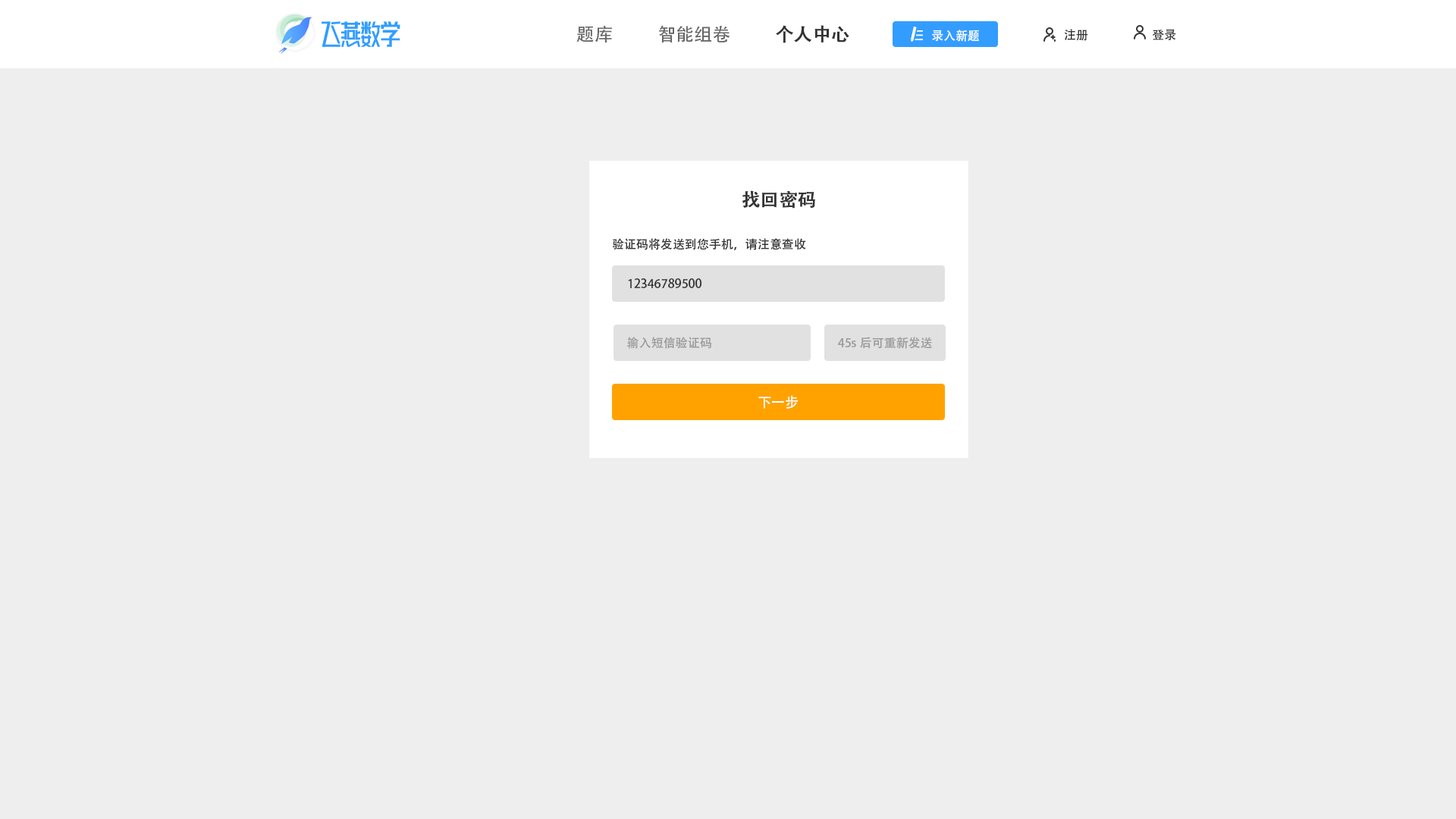
<style>
.page{position:relative;width:1456px;height:819px;background:#eeeeee}
.page>*{position:absolute;margin:0}
.t1{font:18.2px "AdobeHeitiStd-Regular";color:#666666}
.t2{font:18.2px "AdobeHeitiStd-Regular";color:#333333;font-weight:bold}
.t3{font:12.1px "AdobeHeitiStd-Regular";color:#ffffff}
.t4{font:12.1px "AdobeHeitiStd-Regular";color:#333333}
.t5{font:12.1px "AdobeHeitiStd-Regular";color:#999999}
.t6{font:13.6px "AdobeHeitiStd-Regular";color:#ffffff}
</style>
<div class="page">
<p class="t1" style="left:576px;top:26px;width:36px;height:16px">题库</p>
<p class="t1" style="left:659px;top:25px;width:71px;height:17px">智能组卷</p>
<p class="t2" style="left:776px;top:25px;width:73px;height:18px">个人中心</p>
<p class="t3" style="left:932px;top:30px;width:47px;height:12px">录入新题</p>
<p class="t4" style="left:1064px;top:29px;width:24px;height:12px">注册</p>
<p class="t4" style="left:1152px;top:29px;width:24px;height:12px">登录</p>
<p class="t2" style="left:742px;top:190px;width:73px;height:19px">找回密码</p>
<p class="t4" style="left:613px;top:238px;width:193px;height:12px">验证码将发送到您手机，请注意查收</p>
<p class="t4" style="left:628px;top:278px;width:74px;height:10px">12346789500</p>
<p class="t5" style="left:626px;top:337px;width:85px;height:12px">输入短信验证码</p>
<p class="t5" style="left:838px;top:337px;width:94px;height:12px">45s后可重新发送</p>
<p class="t6" style="left:758px;top:395px;width:40px;height:14px">下一步</p>
</div>
